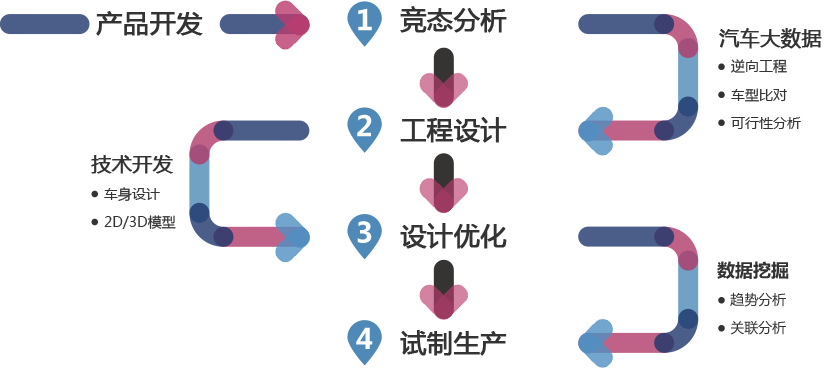
<style>
.page{position:relative;width:830px;height:369px;background:#ffffff}
.page>*{position:absolute;margin:0}
.t1{font:26px "MicrosoftYaHei";color:#333333;font-weight:bold}
.t2{font:20px "MicrosoftYaHei";color:#333333;font-weight:bold}
.t3{font:14px "MicrosoftYaHei";color:#333333}
</style>
<div class="page">
<p class="t1" style="left:400px;top:6px;width:107px;height:27px">竞态分析</p>
<p class="t1" style="left:96px;top:11px;width:107px;height:25px">产品开发</p>
<p class="t2" style="left:719px;top:28px;width:103px;height:21px">汽车大数据</p>
<p class="t3" style="left:731px;top:59px;width:56px;height:15px">逆向工程</p>
<p class="t3" style="left:731px;top:88px;width:56px;height:14px">车型比对</p>
<p class="t1" style="left:400px;top:117px;width:107px;height:26px">工程设计</p>
<p class="t3" style="left:731px;top:117px;width:70px;height:12px">可行性分析</p>
<p class="t2" style="left:91px;top:155px;width:82px;height:19px">技术开发</p>
<p class="t3" style="left:104px;top:187px;width:56px;height:14px">车身设计</p>
<p class="t3" style="left:104px;top:215px;width:72px;height:14px">2D/3D模型</p>
<p class="t1" style="left:400px;top:223px;width:107px;height:26px">设计优化</p>
<p class="t1" style="left:400px;top:330px;width:107px;height:26px">试制生产</p>
</div>
